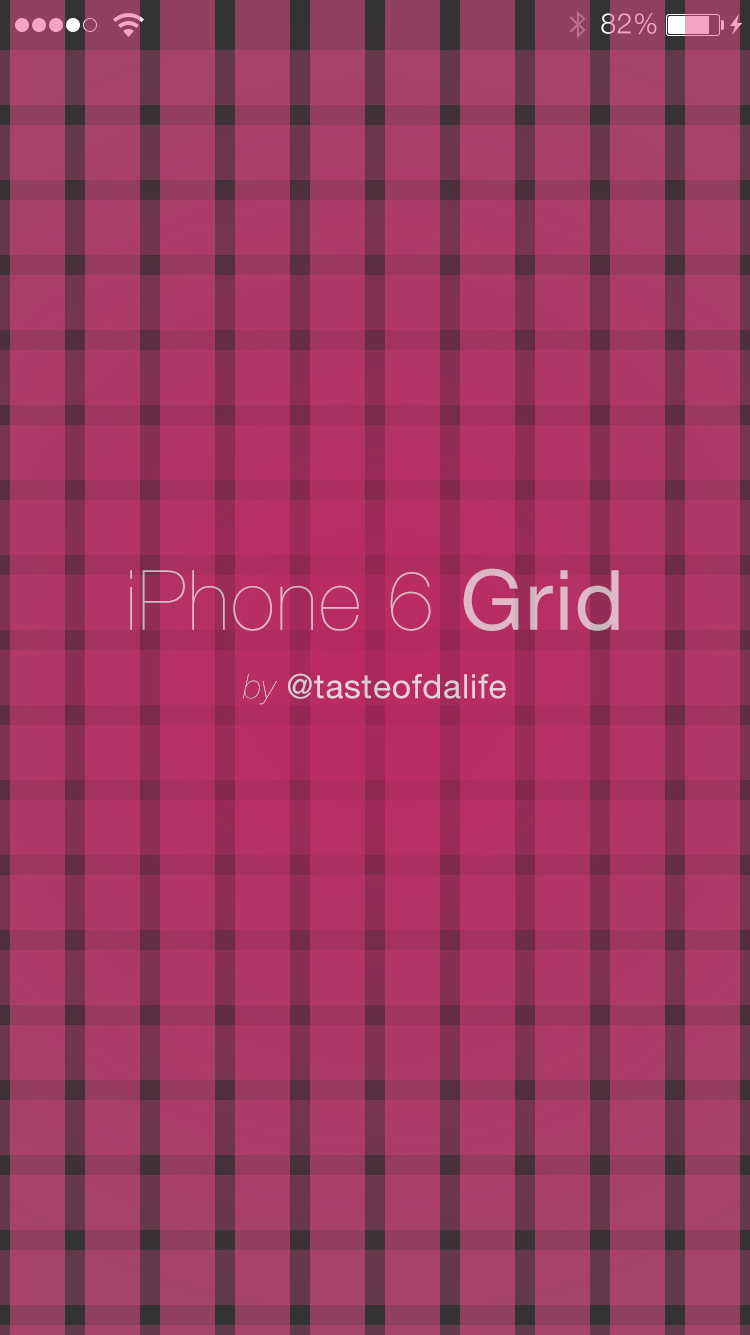
<style>
.page{position:relative;width:750px;height:1335px}
.page>*{position:absolute;margin:0}
.t1{font:28px "HelveticaNeue-Light";letter-spacing:0.025em;color:#f4a5c4}
.t2{font:83.3px "HelveticaNeue-UltraLight";letter-spacing:0.02em;color:#dfb8c6}
.t3{font:83.3px "HelveticaNeue";letter-spacing:0.02em;color:#dfb8c6}
.t4{font:33.7px "HelveticaNeue";letter-spacing:0.02em;color:#e9d0d9}
.t5{font:33.7px "HelveticaNeue-UltraLightItalic";letter-spacing:0.02em;color:#e9d0d9}
</style>
<div class="page">
<p class="t1" style="left:601px;top:13px;width:56px;height:22px">82%</p>
<p class="t2" style="left:130px;top:568px;width:489px;height:63px">iPhone 6 <span class="t3">Grid</span></p>
<p class="t4" style="left:243px;top:673px;width:263px;height:32px"><span class="t5">by </span>@tasteofdalife</p>
</div>
